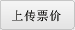
<style>
.page{position:relative;width:75px;height:30px}
.page>*{position:absolute;margin:0}
.t1{font:12px "SimSun";letter-spacing:0.05em;color:#060502}
</style>
<div class="page">
<p class="t1" style="left:12px;top:10px;width:49px;height:12px">上传票价</p>
</div>
